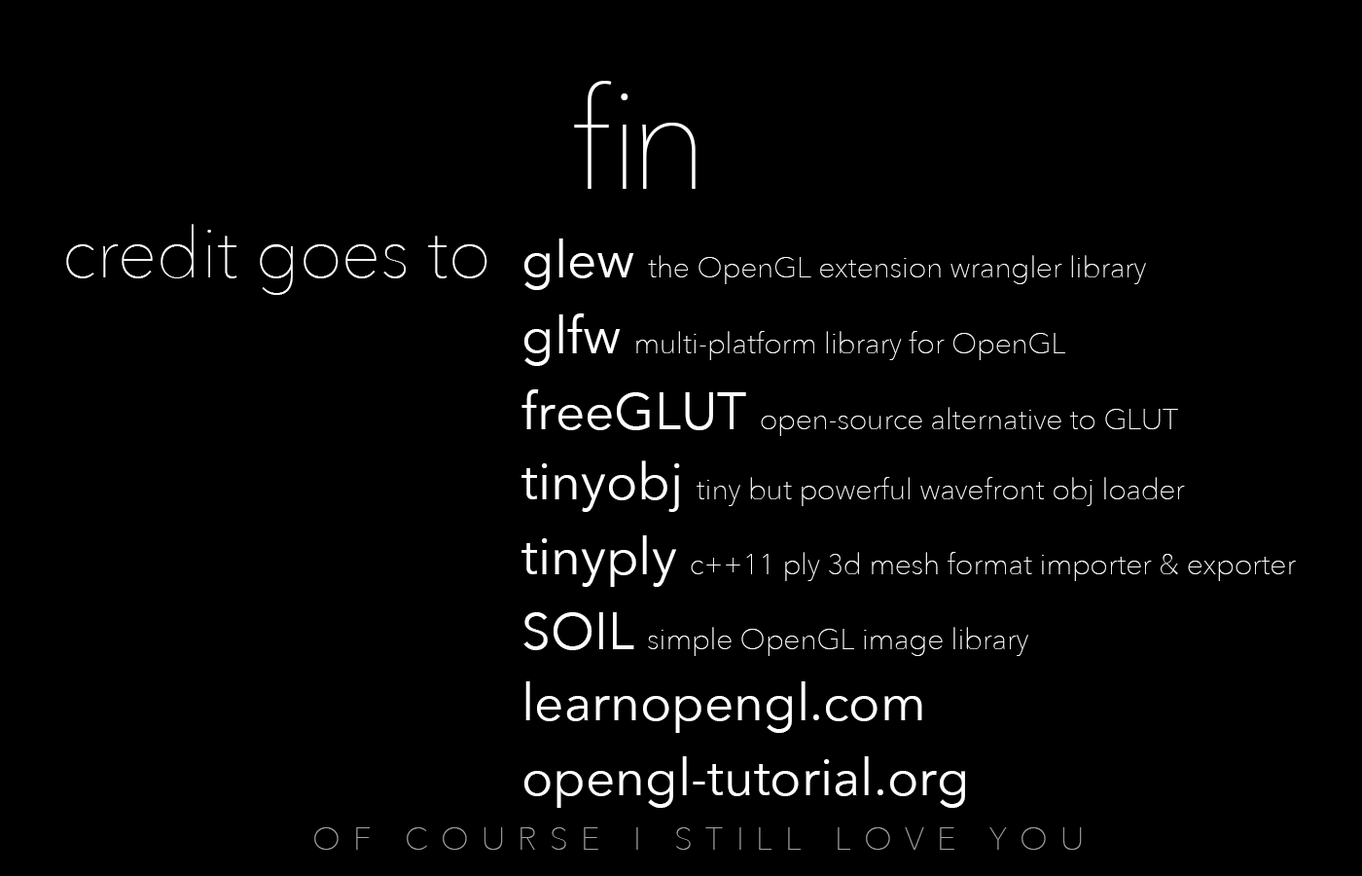
<style>
.page{position:relative;width:1362px;height:876px;background:#000000}
.page>*{position:absolute;margin:0}
.t1{font:140.1px "AvenirNext-UltraLight";letter-spacing:-0.08em;color:#ffffff}
.t2{font:70px "AvenirNext-UltraLight";color:#ffffff}
.t3{font:29.2px "AvenirNext-UltraLight";color:#ffffff}
.t4{font:51.6px "AvenirNext-Regular";color:#ffffff}
.t5{font:32.1px "AvenirNext-UltraLight";letter-spacing:0.4em;color:#a3a3a3}
</style>
<div class="page">
<p class="t1" style="left:574px;top:81px;width:122px;height:108px">fin</p>
<p class="t2" style="left:66px;top:224px;width:421px;height:71px">credit goes to</p>
<p class="t3" style="left:524px;top:238px;width:622px;height:52px"><span class="t4">glew </span>the OpenGL extension wrangler library</p>
<p class="t3" style="left:524px;top:313px;width:541px;height:53px"><span class="t4">glfw </span>multi-platform library for OpenGL</p>
<p class="t3" style="left:521px;top:389px;width:657px;height:47px"><span class="t4">freeGLUT </span>open-source alternative to GLUT</p>
<p class="t3" style="left:521px;top:460px;width:664px;height:52px"><span class="t4">tinyobj </span>tiny but powerful wavefront obj loader</p>
<p class="t3" style="left:521px;top:535px;width:775px;height:52px"><span class="t4">tinyply </span>c++11 ply 3d mesh format importer &amp; exporter</p>
<p class="t3" style="left:523px;top:612px;width:505px;height:44px"><span class="t4">SOIL </span>simple OpenGL image library</p>
<p class="t4" style="left:525px;top:681px;width:397px;height:52px">learnopengl.com</p>
<p class="t4" style="left:524px;top:756px;width:441px;height:51px">opengl-tutorial.org</p>
<p class="t5" style="left:314px;top:827px;width:768px;height:22px">OF COURSE I STILL LOVE YOU</p>
</div>
